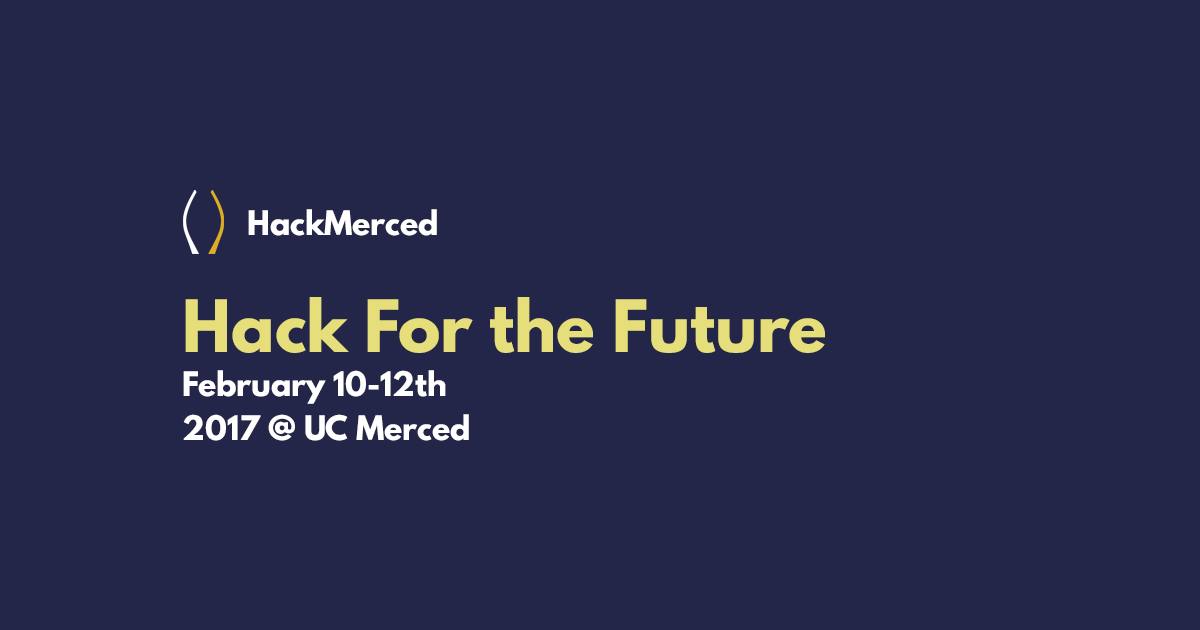
<style>
.page{position:relative;width:1200px;height:630px;background:#232648}
.page>*{position:absolute;margin:0}
.t1{font:30px "LeagueSpartan-Bold";color:#ffffff}
.t2{font:30px/44px "LeagueSpartan-Bold";color:#ffffff}
.t3{font:64px/44px "LeagueSpartan-Bold";color:#e5de7a}
</style>
<div class="page">
<p class="t1" style="left:248px;top:209px;width:189px;height:27px">HackMerced</p>
<p class="t2" style="left:183px;top:297px;width:642px;height:144px"><span class="t3">Hack For the Future<br></span>February 10-12th <br>2017 @ UC Merced</p>
</div>
